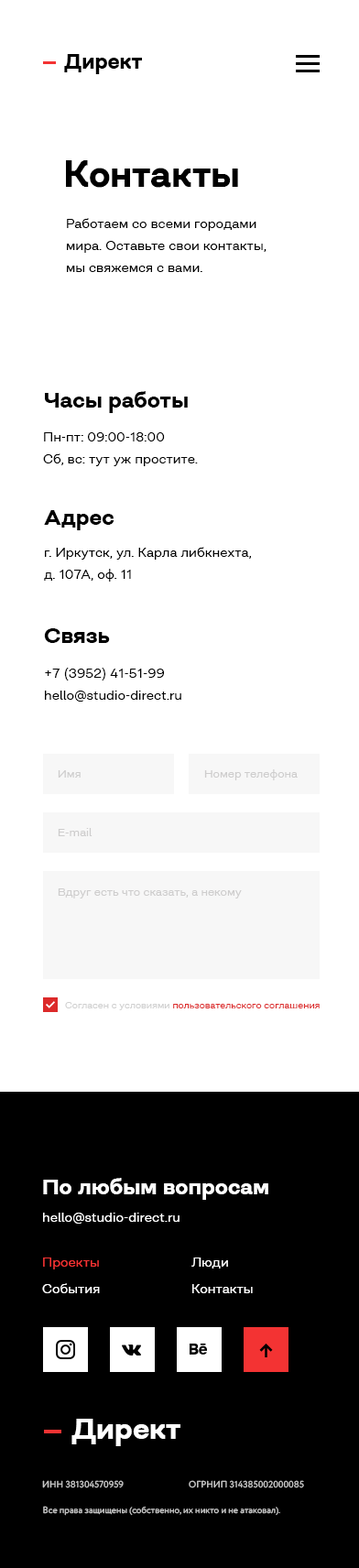
<style>
.page{position:relative;width:359px;height:1568px;background:#ffffff}
.page>*{position:absolute;margin:0}
.t1{font:20.9px "Closer-Bold";color:#000000}
.t2{font:36.6px "Closer-Bold";color:#000000}
.t3{font:12.8px/22px "Closer-Regular";color:#000000}
.t4{font:22px "Closer-Bold";color:#000000}
.t5{font:11px "Closer-Regular";color:#cecdcd}
.t6{font:9.2px "Closer-Regular";color:#dc2a2a}
.t7{font:9.2px "Closer-Regular";color:#d0d0d0}
.t8{font:22px "Closer-Bold";color:#ffffff}
.t9{font:12.8px "Closer-Regular";color:#ffffff}
.t10{font:12.8px "Closer-Regular";color:#f33333}
.t11{font:29.3px "Closer-Bold";color:#ffffff}
.t12{font:9.2px "Circe-Regular";color:#c8c8c8}
</style>
<div class="page">
<p class="t1" style="left:64px;top:54px;width:78px;height:20px">Директ</p>
<p class="t2" style="left:66px;top:160px;width:172px;height:28px">Контакты</p>
<p class="t3" style="left:67px;top:218px;width:200px;height:54px">Работаем со всеми городами мира. Оставьте свои контакты, мы свяжемся с вами.</p>
<p class="t4" style="left:45px;top:391px;width:143px;height:22px">Часы работы</p>
<p class="t3" style="left:43px;top:432px;width:155px;height:34px">Пн-пт: 09:00-18:00<br>Сб, вс: тут уж простите.</p>
<p class="t4" style="left:44px;top:510px;width:70px;height:20px">Адрес</p>
<p class="t3" style="left:44px;top:547px;width:207px;height:35px">г. Иркутск, ул. Карла либкнехта,<br>д. 107А, оф. 11</p>
<p class="t4" style="left:44px;top:628px;width:66px;height:15px">Связь</p>
<p class="t3" style="left:45px;top:668px;width:136px;height:34px">+7 (3952) 41-51-99<br>hello@studio-direct.ru</p>
<p class="t5" style="left:58px;top:770px;width:23px;height:8px">Имя</p>
<p class="t5" style="left:204px;top:769px;width:94px;height:11px">Номер телефона</p>
<p class="t5" style="left:58px;top:828px;width:35px;height:8px">E-mail</p>
<p class="t5" style="left:58px;top:888px;width:184px;height:10px">Вдруг есть что сказать, а некому</p>
<p class="t6" style="left:65px;top:1002px;width:255px;height:8px"><span class="t7">Согласен с условиями </span>пользовательского соглашения</p>
<p class="t8" style="left:43px;top:1178px;width:225px;height:22px">По любым вопросам</p>
<p class="t9" style="left:43px;top:1213px;width:137px;height:11px">hello@studio-direct.ru</p>
<p class="t10" style="left:43px;top:1258px;width:56px;height:11px">Проекты</p>
<p class="t9" style="left:191px;top:1258px;width:37px;height:11px">Люди</p>
<p class="t9" style="left:42px;top:1283px;width:58px;height:10px">События</p>
<p class="t9" style="left:192px;top:1284px;width:61px;height:9px">Контакты</p>
<p class="t11" style="left:71px;top:1419px;width:109px;height:27px">Директ</p>
<p class="t12" style="left:42px;top:1480px;width:82px;height:8px">ИНН 381304570959</p>
<p class="t12" style="left:189px;top:1480px;width:115px;height:8px">ОГРНИП 314385002000085</p>
<p class="t12" style="left:43px;top:1506px;width:237px;height:10px">Все права защищены (собственно, их никто и не атаковал).</p>
</div>
